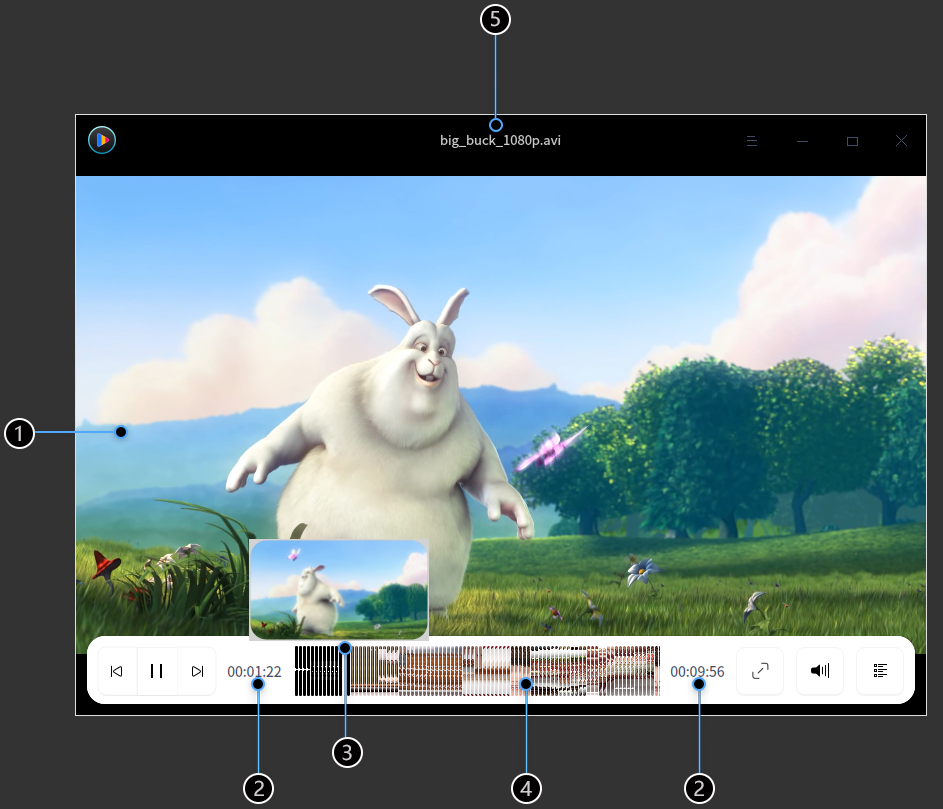
<style>
.page{position:relative;width:943px;height:809px;background:#333333}
.page>*{position:absolute;margin:0}
.t1{font:20px "MicrosoftYaHei";letter-spacing:-0.05em;color:#d0cdcd}
</style>
<div class="page">
<p class="t1" style="left:491px;top:11px;width:9px;height:16px">5</p>
<p class="t1" style="left:15px;top:425px;width:6px;height:16px">1</p>
<p class="t1" style="left:342px;top:744px;width:10px;height:17px">3</p>
<p class="t1" style="left:254px;top:780px;width:10px;height:16px">2</p>
<p class="t1" style="left:520px;top:781px;width:12px;height:15px">4</p>
<p class="t1" style="left:694px;top:780px;width:10px;height:16px">2</p>
</div>
